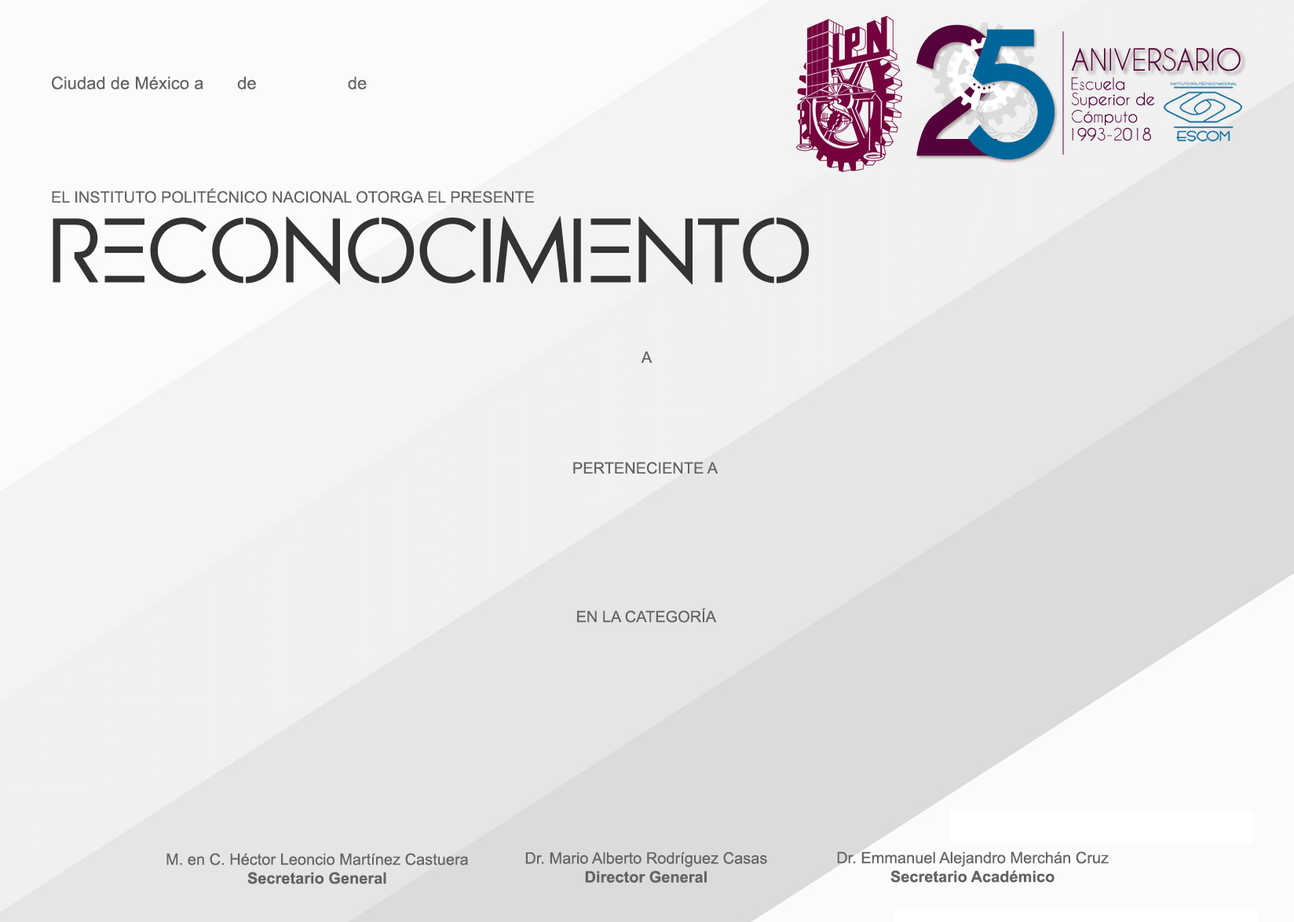
<style>
.page{position:relative;width:1294px;height:922px;background:#e5e5e5}
.page>*{position:absolute;margin:0}
.t1{font:17.3px "ArialMT";color:#646464}
.t2{font:15.7px "ArialMT";color:#646464}
.t3{font:15.7px "Arial-BoldMT";color:#646464}
</style>
<div class="page">
<p class="t1" style="left:52px;top:76px;width:315px;height:13px">Ciudad de México a       de                   de</p>
<p class="t2" style="left:52px;top:188px;width:482px;height:15px">EL INSTITUTO POLITÉCNICO NACIONAL OTORGA EL PRESENTE</p>
<p class="t2" style="left:641px;top:351px;width:11px;height:12px">A</p>
<p class="t2" style="left:573px;top:462px;width:145px;height:12px">PERTENECIENTE A</p>
<p class="t2" style="left:577px;top:608px;width:140px;height:15px">EN LA CATEGORÍA</p>
<p class="t2" style="left:166px;top:853px;width:302px;height:31px;text-align:center">M. en C. Héctor Leoncio Martínez Castuera<br><span class="t3">Secretario General</span></p>
<p class="t2" style="left:525px;top:852px;width:242px;height:30px;text-align:center">Dr. Mario Alberto Rodríguez Casas​<br><span class="t3">Director General</span></p>
<p class="t2" style="left:837px;top:851px;width:272px;height:31px;text-align:center">Dr. Emmanuel Alejandro Merchán Cruz<br><span class="t3">Secretario Académico</span></p>
</div>
